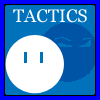
<style>
.page{position:relative;width:100px;height:100px;background:#0072bc}
.page>*{position:absolute;margin:0}
.t1{font:18px "Georgia";color:#ffffff}
</style>
<div class="page">
<p class="t1" style="left:13px;top:9px;width:74px;height:14px">TACTICS</p>
</div>
